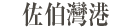
<style>
.page{position:relative;width:132px;height:27px;background:#ffffff}
.page>*{position:absolute;margin:0}
.t1{font:26px "RyuminPr6N-ExBold";color:#4c4843;scale:0.85 1}
</style>
<div class="page">
<p class="t1" style="left:22px;top:1px;width:87px;height:26px">佐伯灣港</p>
</div>
